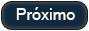
<style>
.page{position:relative;width:89px;height:31px;background:#11293d}
.page>*{position:absolute;margin:0}
.t1{font:18px "Latha";color:#ffffff}
</style>
<div class="page">
<p class="t1" style="left:16px;top:7px;width:59px;height:13px">Próximo</p>
</div>
